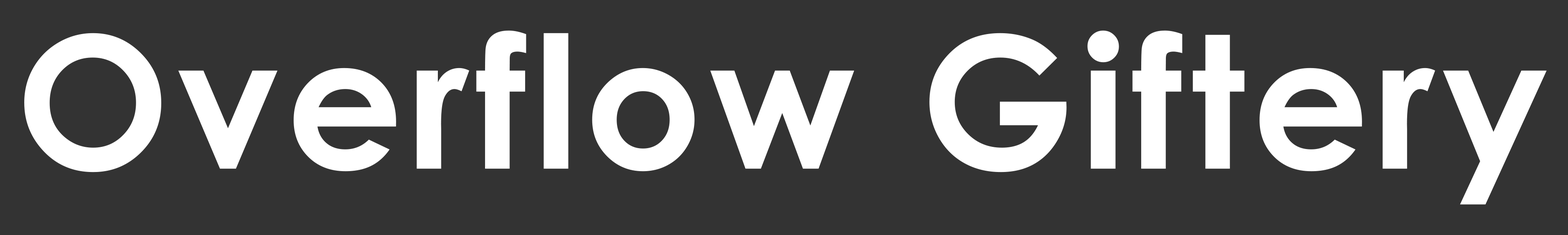
<style>
.page{position:relative;width:1568px;height:235px;background:#333333}
.page>*{position:absolute;margin:0}
.t1{font:183.6px "CenturyGothic-Bold";letter-spacing:0.01em;color:#ffffff;font-weight:bold}
</style>
<div class="page">
<p class="t1" style="left:24px;top:30px;width:1523px;height:175px">Overflow Giftery</p>
</div>
